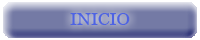
<style>
.page{position:relative;width:200px;height:40px;background:#747aa5}
.page>*{position:absolute;margin:0}
.t1{font:18px "Vani";color:#4e63e3;text-transform:uppercase}
</style>
<div class="page">
<p class="t1" style="left:70px;top:13px;width:60px;height:12px">Inicio</p>
</div>
